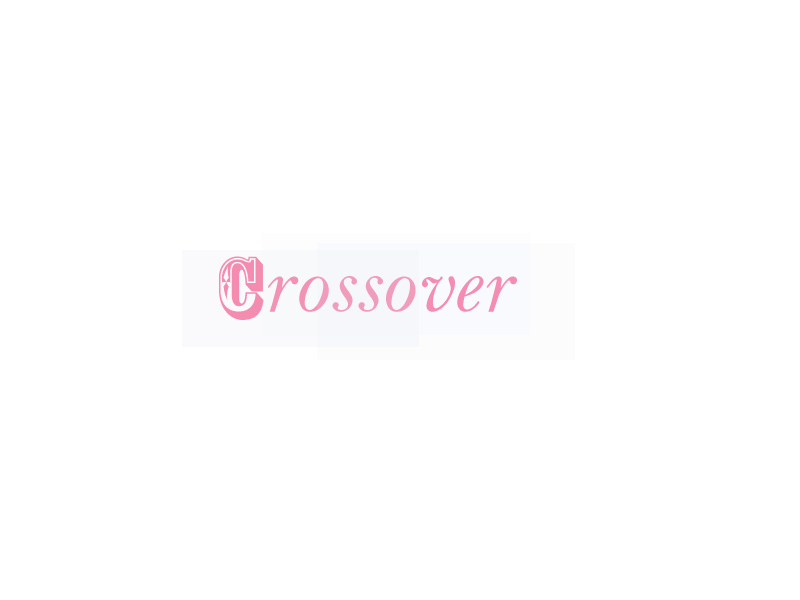
<style>
.page{position:relative;width:800px;height:600px;background:#ffffff}
.page>*{position:absolute;margin:0}
.t1{font:83.3px "BellMTItalic";color:#f38db1}
.t2{font:83.3px "RosewoodStd-Regular";color:#f38db1}
</style>
<div class="page">
<p class="t1" style="left:219px;top:256px;width:298px;height:64px"><span class="t2">C</span>rossover</p>
</div>
